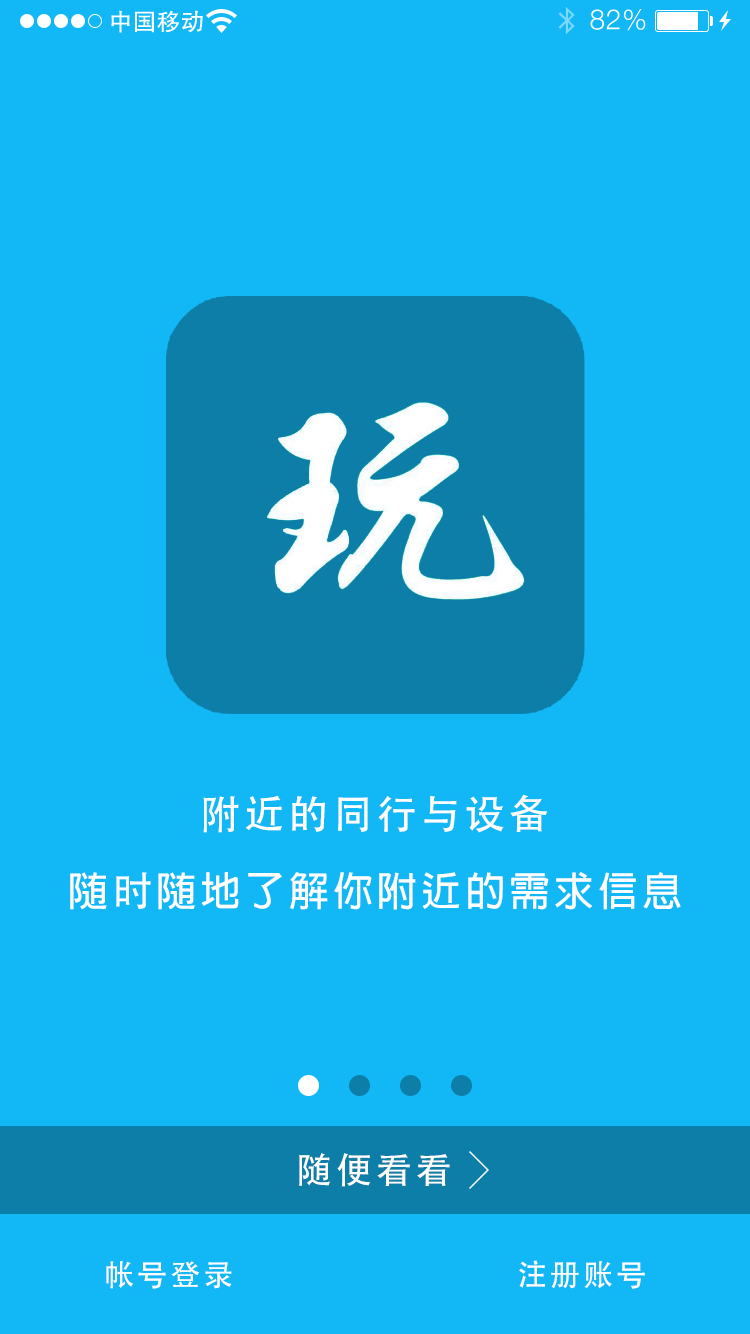
<style>
.page{position:relative;width:750px;height:1334px;background:#12b8f6}
.page>*{position:absolute;margin:0}
.t1{font:40px "AdobeHeitiStd-Regular";letter-spacing:0.104em;color:#ffffff}
.t2{font:40px "AdobeFanHeitiStd-Bold";letter-spacing:0.104em;color:#feffff}
.t3{font:40px "AdobeHeitiStd-Regular";letter-spacing:0.104em;color:#feffff}
.t4{font:36px "AdobeHeitiStd-Regular";letter-spacing:0.104em;color:#fefefe}
.t5{font:30px "AdobeHeitiStd-Regular";letter-spacing:0.104em;color:#fefefe}
</style>
<div class="page">
<p class="t1" style="left:203px;top:794px;width:345px;height:39px">附近的同行与设备</p>
<p class="t2" style="left:70px;top:872px;width:611px;height:38px">随<span class="t3">时</span>随地了解你附近的需求信息</p>
<p class="t4" style="left:299px;top:1153px;width:151px;height:34px">随便看看</p>
<p class="t5" style="left:106px;top:1261px;width:126px;height:28px">帐号登录</p>
<p class="t5" style="left:519px;top:1260px;width:126px;height:29px">注册账号</p>
</div>
